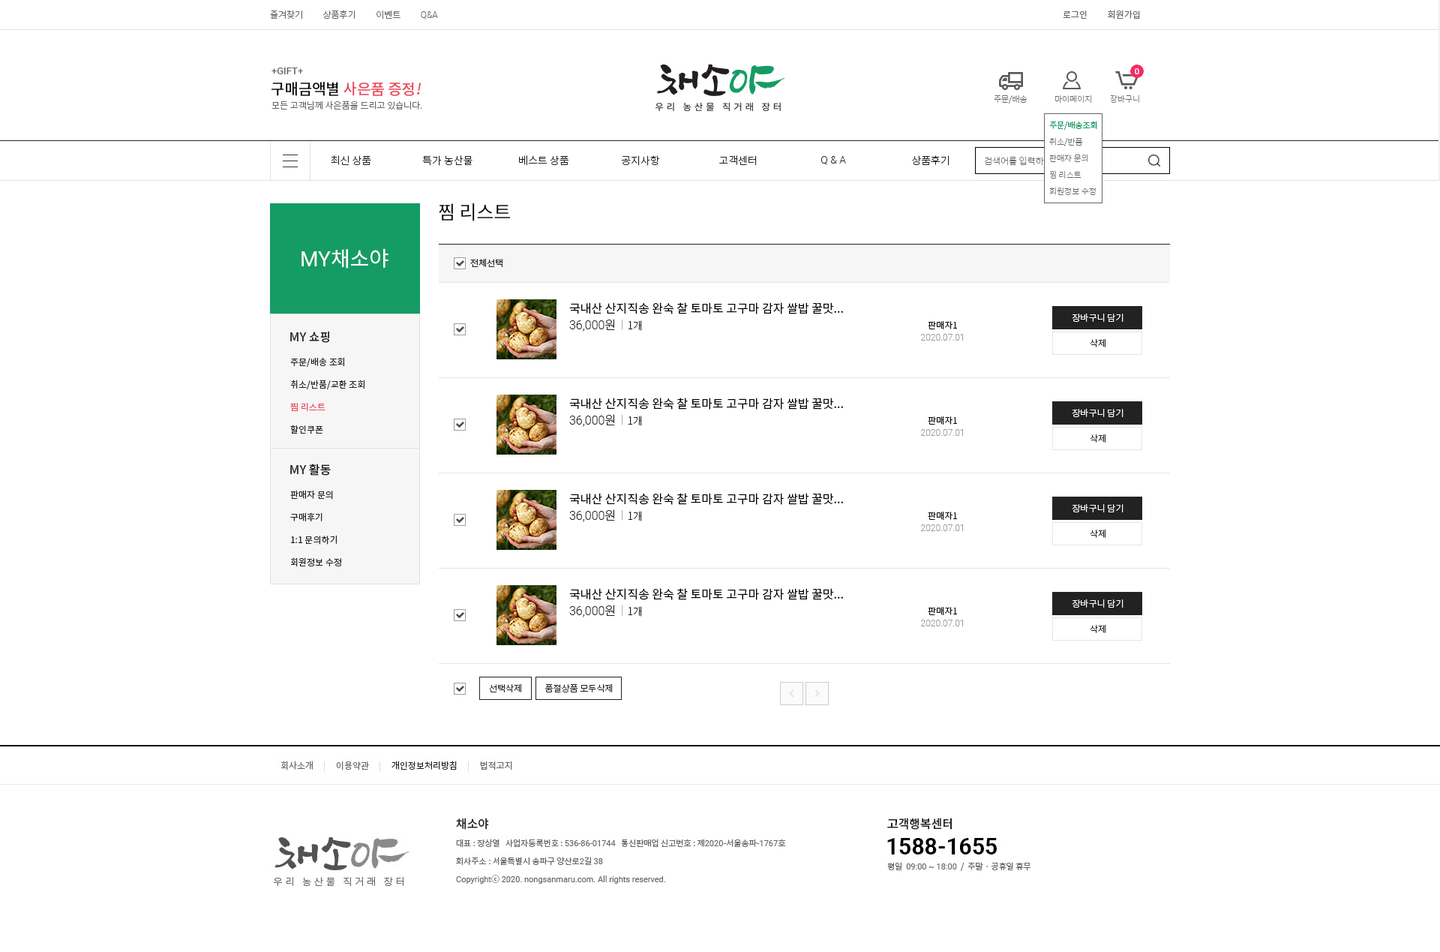
<style>
.page{position:relative;width:1440px;height:952px;background:#ffffff}
.page>*{position:absolute;margin:0}
.t1{font:9px "NotoSansCJKkr-Light";color:#666666}
.t2{font:9px "Roboto-Light";color:#666666}
.t3{font:9px "NotoSansCJKkr-DemiLight";color:#666666}
.t4{font:9.7px "Roboto-Medium";color:#666666}
.t5{font:15px "NotoSansCJKkr-Medium";color:#ea475c}
.t6{font:15px "NotoSansCJKkr-Medium";color:#000000}
.t7{font:15px "NotoSansCJKkr-Medium";color:#ea475c;font-style:italic}
.t8{font:8.2px "NotoSansCJKkr-Thin";color:#666666}
.t9{font:8.2px/16.5px "NotoSansCJKkr-Thin";color:#666666}
.t10{font:8.2px/16.5px "NotoSansCJKkr-Regular";color:#159c65}
.t11{font:10.5px "NotoSansCJKkr-Light";color:#222222}
.t12{font:10.5px "Roboto-Light";color:#222222}
.t13{font:9px "NotoSansCJKkr-Thin";color:#666666}
.t14{font:18.7px "NotoSansCJKkr-Regular";color:#000000}
.t15{font:21px "NotoSansCJKkr-Regular";color:#ffffff}
.t16{font:21px "Roboto-Regular";color:#ffffff}
.t17{font:9px "NotoSansCJKkr-Regular";color:#222222}
.t18{font:12px "NotoSansCJKkr-Regular";color:#000000}
.t19{font:9px "NotoSansCJKkr-Light";color:#ffffff}
.t20{font:12px "Roboto-Light";color:#222222}
.t21{font:12px "NotoSansCJKkr-Light";color:#222222}
.t22{font:9px "NotoSansCJKkr-Light";color:#999999}
.t23{font:9px/12px "Roboto-Light";color:#999999}
.t24{font:9px/12px "NotoSansCJKkr-Light";color:#000000}
.t25{font:12px "NotoSansCJKkr-Medium";color:#222222}
.t26{font:9px "NotoSansCJKkr-Light";color:#222222}
.t27{font:9px/22.5px "NotoSansCJKkr-Regular";color:#222222}
.t28{font:9px/22.5px "NotoSansCJKkr-Regular";color:#ea475c}
</style>
<div class="page">
<p class="t1" style="left:270px;top:10px;width:168px;height:9px">즐겨찾기          상품후기          이벤트          <span class="t2">Q&amp;A</span></p>
<p class="t3" style="left:1063px;top:10px;width:77px;height:9px">로그인          회원가입</p>
<p class="t4" style="left:271px;top:67px;width:32px;height:7px">+GIFT+</p>
<p class="t5" style="left:271px;top:82px;width:150px;height:14px"><span class="t6">구매금액별 </span>사은품 증정<span class="t7">!</span></p>
<p class="t1" style="left:271px;top:100px;width:151px;height:9px">모든 고객님께 사은품을 드리고 있습니다.</p>
<p class="t8" style="left:994px;top:94px;width:33px;height:9px">주문/배송</p>
<p class="t8" style="left:1054px;top:95px;width:38px;height:8px">마이페이지</p>
<p class="t8" style="left:1110px;top:94px;width:29px;height:9px">장바구니</p>
<p class="t9" style="left:1049px;top:121px;width:48px;height:74px"><span class="t10">주문/배송조회<br></span>취소/반품<br>판매자 문의<br>찜 리스트<br>회원정보 수정</p>
<p class="t11" style="left:331px;top:155px;width:40px;height:10px">최신 상품</p>
<p class="t11" style="left:422px;top:155px;width:50px;height:11px">특가 농산물</p>
<p class="t11" style="left:519px;top:155px;width:50px;height:11px">베스트 상품</p>
<p class="t11" style="left:622px;top:155px;width:38px;height:11px">공지사항</p>
<p class="t11" style="left:719px;top:155px;width:38px;height:11px">고객센터</p>
<p class="t12" style="left:821px;top:156px;width:25px;height:9px">Q &amp; A</p>
<p class="t11" style="left:912px;top:155px;width:37px;height:11px">상품후기</p>
<p class="t13" style="left:984px;top:156px;width:76px;height:10px">검색어를 입력하세요</p>
<p class="t14" style="left:439px;top:203px;width:71px;height:18px">찜 리스트</p>
<p class="t15" style="left:301px;top:248px;width:87px;height:20px"><span class="t16">MY</span>채소야</p>
<p class="t17" style="left:470px;top:259px;width:32px;height:8px">전체선택</p>
<p class="t18" style="left:569px;top:302px;width:274px;height:12px">국내산 산지직송 완숙 찰 토마토 고구마 감자 쌀밥 꿀맛...</p>
<p class="t19" style="left:1072px;top:313px;width:51px;height:9px">장바구니 담기</p>
<p class="t20" style="left:569px;top:319px;width:73px;height:12px">36,000<span class="t21">원  </span><span class="t22">|  </span><span class="t11">1개</span></p>
<p class="t23" style="left:921px;top:321px;width:42px;height:19px;text-align:center"><span class="t24">판매자1<br></span>2020.07.01</p>
<p class="t25" style="left:290px;top:331px;width:39px;height:12px">MY 쇼핑</p>
<p class="t26" style="left:1090px;top:338px;width:15px;height:9px">삭제</p>
<p class="t27" style="left:290px;top:357px;width:74px;height:77px">주문/배송 조회<br>취소/반품/교환 조회<br><span class="t28">찜 리스트<br></span>할인쿠폰</p>
<p class="t18" style="left:569px;top:397px;width:274px;height:12px">국내산 산지직송 완숙 찰 토마토 고구마 감자 쌀밥 꿀맛...</p>
<p class="t20" style="left:569px;top:414px;width:73px;height:13px">36,000<span class="t21">원  </span><span class="t22">|  </span><span class="t11">1개</span></p>
<p class="t19" style="left:1072px;top:408px;width:51px;height:9px">장바구니 담기</p>
<p class="t23" style="left:921px;top:416px;width:42px;height:20px;text-align:center"><span class="t24">판매자1<br></span>2020.07.01</p>
<p class="t26" style="left:1090px;top:433px;width:15px;height:9px">삭제</p>
<p class="t25" style="left:290px;top:463px;width:41px;height:12px">MY 활동</p>
<p class="t27" style="left:290px;top:490px;width:51px;height:76px">판매자 문의<br>구매후기<br>1:1 문의하기<br>회원정보 수정</p>
<p class="t18" style="left:569px;top:493px;width:274px;height:12px">국내산 산지직송 완숙 찰 토마토 고구마 감자 쌀밥 꿀맛...</p>
<p class="t20" style="left:569px;top:509px;width:73px;height:13px">36,000<span class="t21">원  </span><span class="t22">|  </span><span class="t11">1개</span></p>
<p class="t19" style="left:1072px;top:503px;width:51px;height:9px">장바구니 담기</p>
<p class="t23" style="left:921px;top:511px;width:42px;height:20px;text-align:center"><span class="t24">판매자1<br></span>2020.07.01</p>
<p class="t26" style="left:1090px;top:529px;width:15px;height:9px">삭제</p>
<p class="t18" style="left:569px;top:588px;width:274px;height:12px">국내산 산지직송 완숙 찰 토마토 고구마 감자 쌀밥 꿀맛...</p>
<p class="t20" style="left:569px;top:604px;width:73px;height:13px">36,000<span class="t21">원  </span><span class="t22">|  </span><span class="t11">1개</span></p>
<p class="t19" style="left:1072px;top:598px;width:51px;height:9px">장바구니 담기</p>
<p class="t23" style="left:921px;top:607px;width:42px;height:19px;text-align:center"><span class="t24">판매자1<br></span>2020.07.01</p>
<p class="t26" style="left:1090px;top:624px;width:15px;height:9px">삭제</p>
<p class="t26" style="left:489px;top:683px;width:32px;height:9px">선택삭제</p>
<p class="t26" style="left:545px;top:683px;width:68px;height:9px">품절상품 모두삭제</p>
</div>
